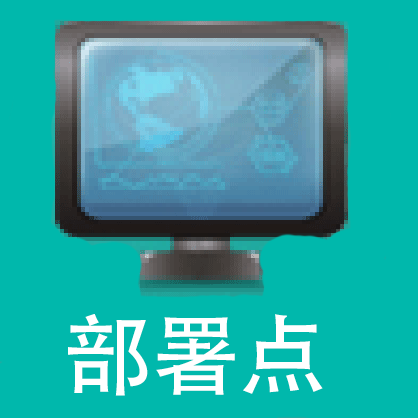
<style>
.page{position:relative;width:418px;height:418px;background:#00b8ac}
.page>*{position:absolute;margin:0}
.t1{font:88px "AdobeHeitiStd-Regular";color:#ffffff}
</style>
<div class="page">
<p class="t1" style="left:68px;top:314px;width:255px;height:82px">部署点</p>
</div>
